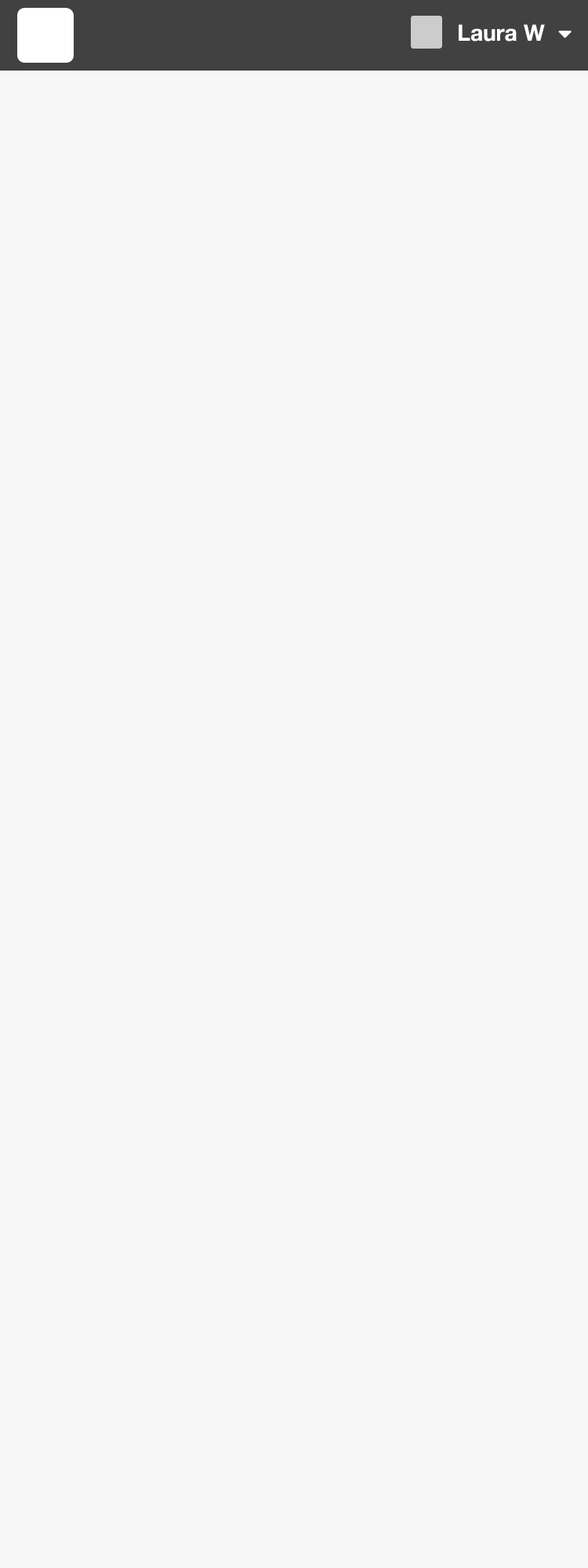
<style>
.page{position:relative;width:588px;height:1568px;background:#f7f7f7}
.page>*{position:absolute;margin:0}
.t1{font:22.5px "HelveticaNeue-Bold";color:#ffffff}
</style>
<div class="page">
<p class="t1" style="left:459px;top:24px;width:86px;height:18px">Laura W</p>
</div>
